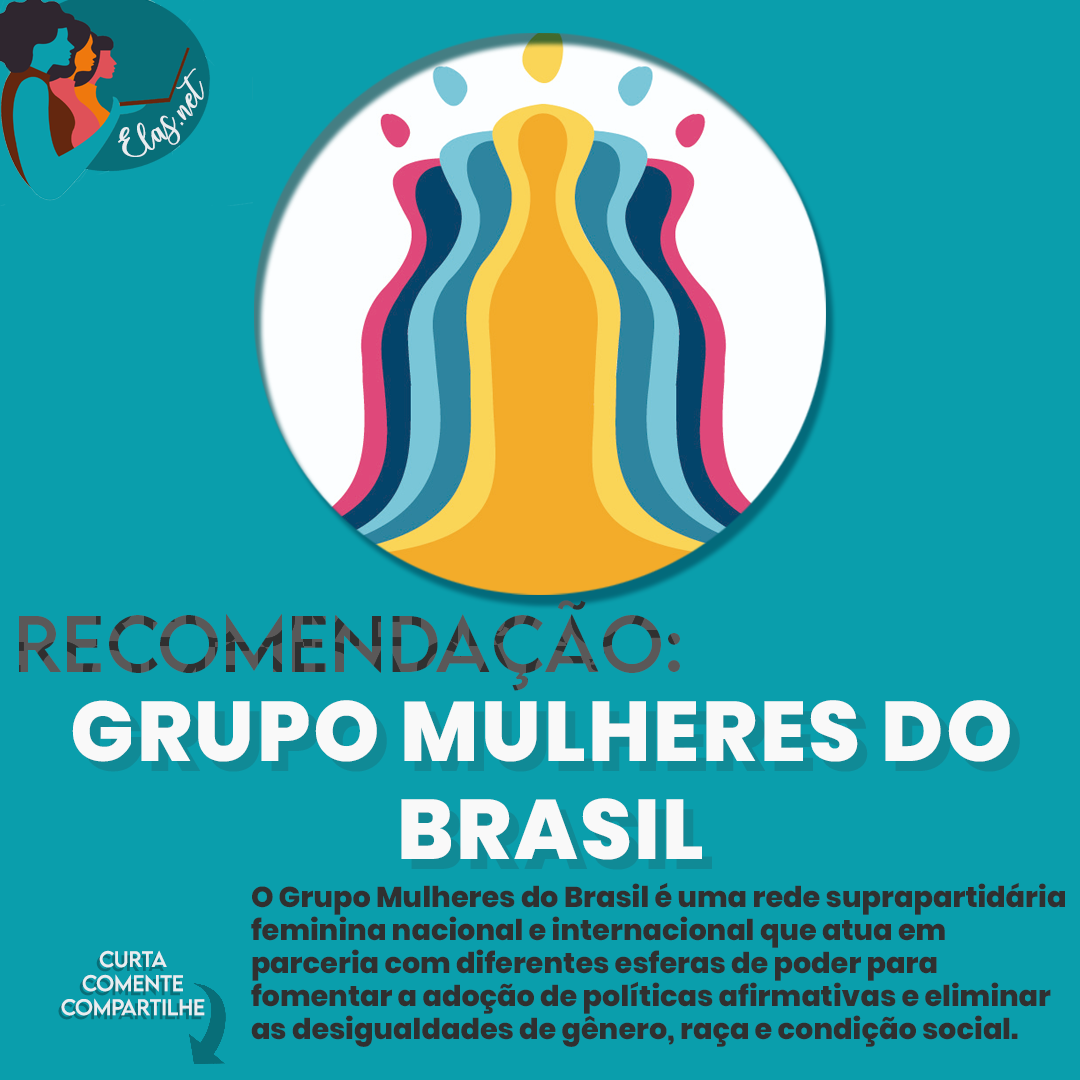
<style>
.page{position:relative;width:1080px;height:1080px;background:#0a9eac}
.page>*{position:absolute;margin:0}
.t1{font:25px "charlinda-Regular";color:#e9edf0;scale:1.18 1}
.t2{font:71.7px "LEMONMILK-Regular";letter-spacing:0.005em}
.t3{font:84.5px/98.3px "Poppins-ExtraBold";letter-spacing:0.03em;color:#f9f9f9;text-transform:uppercase}
.t4{font:28.7px/33.2px "Poppins-ExtraBold";color:#303030}
.t5{font:20px "LEMONMILK-Regular";color:#e9edf0}
.t6{font:20px "LEMONMILK-Regular";color:#086e78}
</style>
<div class="page">
<p class="t1" style="left:118px;top:68px;width:86px;height:89px;rotate:-43deg">Elas.net</p>
<p class="t2" style="left:19px;top:600px;width:661px;height:91px">Recomendação:</p>
<p class="t3" style="left:72px;top:700px;width:938px;height:160px;text-align:center">Grupo Mulheres do <br>Brasil</p>
<p class="t4" style="left:251px;top:882px;width:814px;height:165px">O Grupo Mulheres do Brasil é uma rede suprapartidária<br>feminina nacional e internacional que atua em <br>parceria com diferentes esferas de poder para <br>fomentar a adoção de políticas afirmativas e eliminar <br>as desigualdades de gênero, raça e condição social.</p>
<p class="t5" style="left:61px;top:950px;width:144px;height:66px;text-align:center">Curta<br>Comente<br>Compartilhe</p>
<p class="t6" style="left:58px;top:954px;width:144px;height:66px;text-align:center">Curta<br>Comente<br>Compartilhe</p>
</div>
